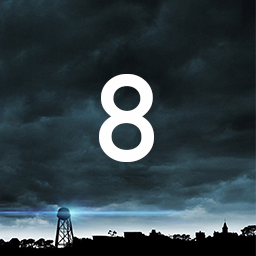
<style>
.page{position:relative;width:256px;height:256px}
.page>*{position:absolute;margin:0}
.t1{font:126px "GillSans";color:#fffefe}
</style>
<div class="page">
<p class="t1" style="left:99px;top:74px;width:55px;height:88px">8</p>
</div>
